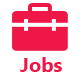
<style>
.page{position:relative;width:80px;height:83px;background:#ffffff}
.page>*{position:absolute;margin:0}
.t1{font:20px "SegoeUI-Bold";color:#ed1847}
</style>
<div class="page">
<p class="t1" style="left:20px;top:57px;width:42px;height:15px">Jobs</p>
</div>
